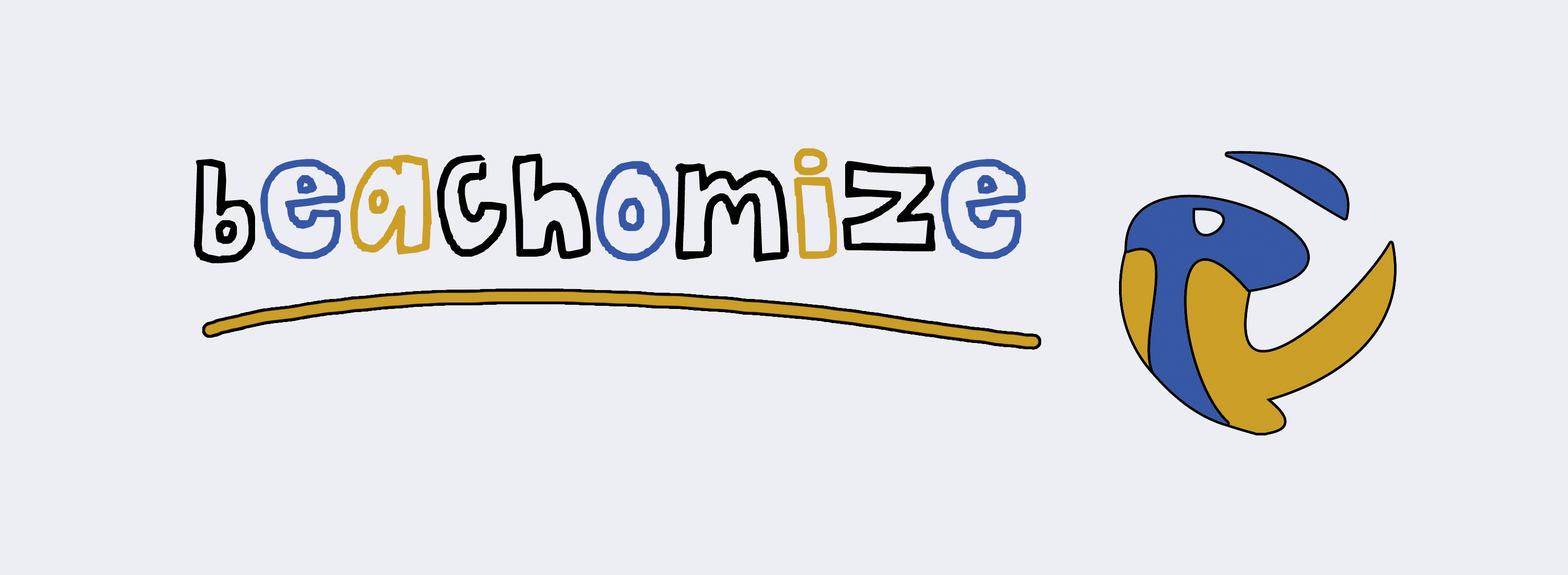
<style>
.page{position:relative;width:1568px;height:575px;background:#ededf4}
.page>*{position:absolute;margin:0}
.t1{font:104.5px "the-bubble-letters";color:#000000}
.t2{font:104.5px "the-bubble-letters";color:#3557a5}
.t3{font:104.5px "the-bubble-letters";color:#cc9f27}
.t4{font:104.5px "the-bubble-letters";color:#3657a5}
</style>
<div class="page">
<p class="t1" style="left:194px;top:148px;width:832px;height:115px">b<span class="t2">e</span><span class="t3">a</span>ch<span class="t2">o</span>m<span class="t3">i</span>z<span class="t4">e</span></p>
</div>
